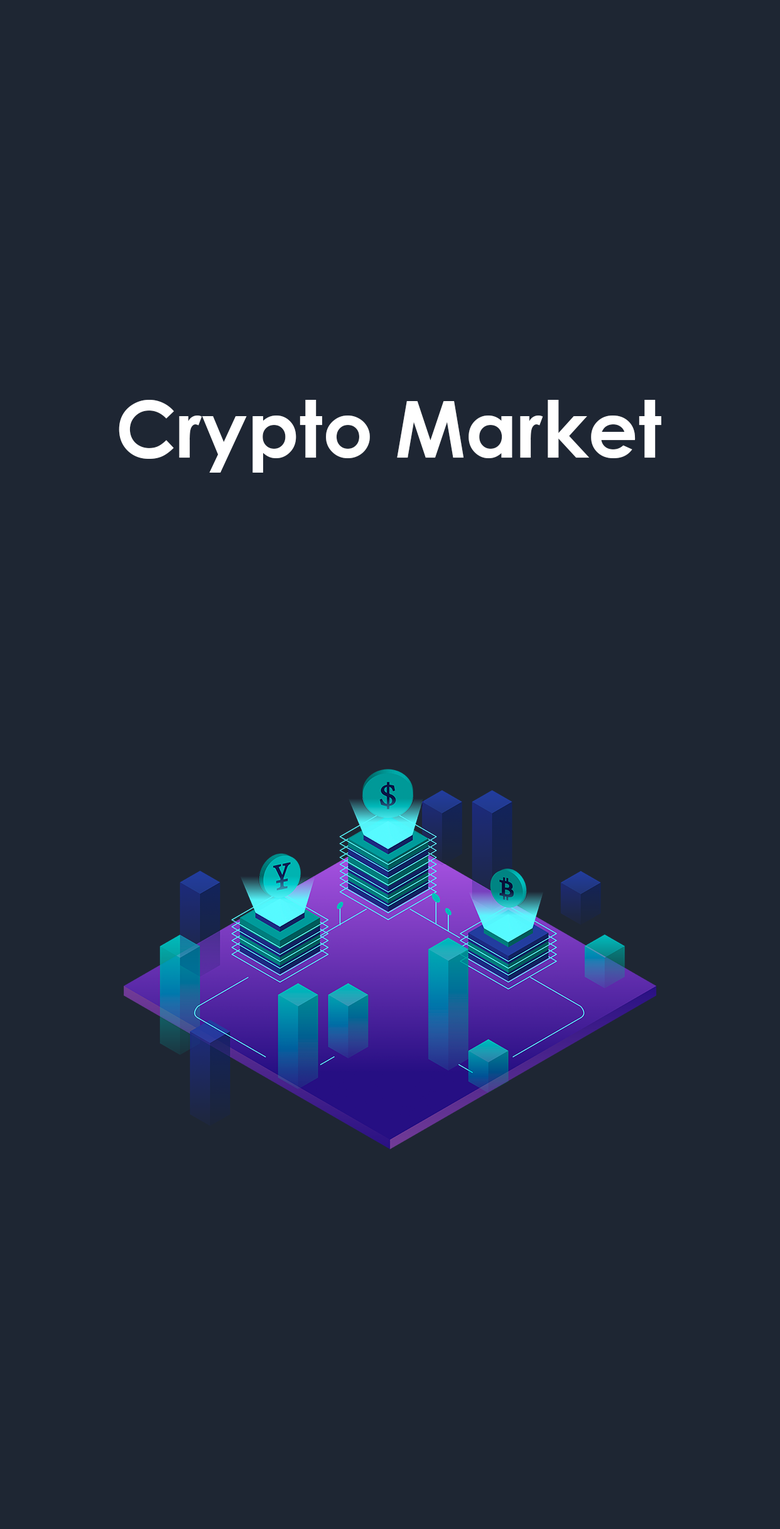
<style>
.page{position:relative;width:780px;height:1529px;background:#1e2633}
.page>*{position:absolute;margin:0}
.t1{font:78.5px "CenturyGothic-Bold";color:#ffffff}
</style>
<div class="page">
<p class="t1" style="left:119px;top:400px;width:542px;height:73px">Crypto Market</p>
</div>
